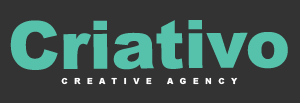
<style>
.page{position:relative;width:300px;height:103px;background:#333333}
.page>*{position:absolute;margin:0}
.t1{font:66.7px "Arial-Black";color:#56c2ab}
.t2{font:8.3px "Arial-Black";letter-spacing:0.72em;color:#ffffff;text-transform:uppercase}
</style>
<div class="page">
<p class="t1" style="left:10px;top:20px;width:278px;height:50px">Criativo</p>
<p class="t2" style="left:61px;top:77px;width:177px;height:8px">Creative Agency</p>
</div>
